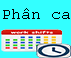
<style>
.page{position:relative;width:71px;height:58px;background:#33ffff}
.page>*{position:absolute;margin:0}
.t1{font:16px "CourierNewPSMT";color:#000000}
</style>
<div class="page">
<p class="t1" style="left:3px;top:8px;width:67px;height:11px">Phân ca</p>
</div>
